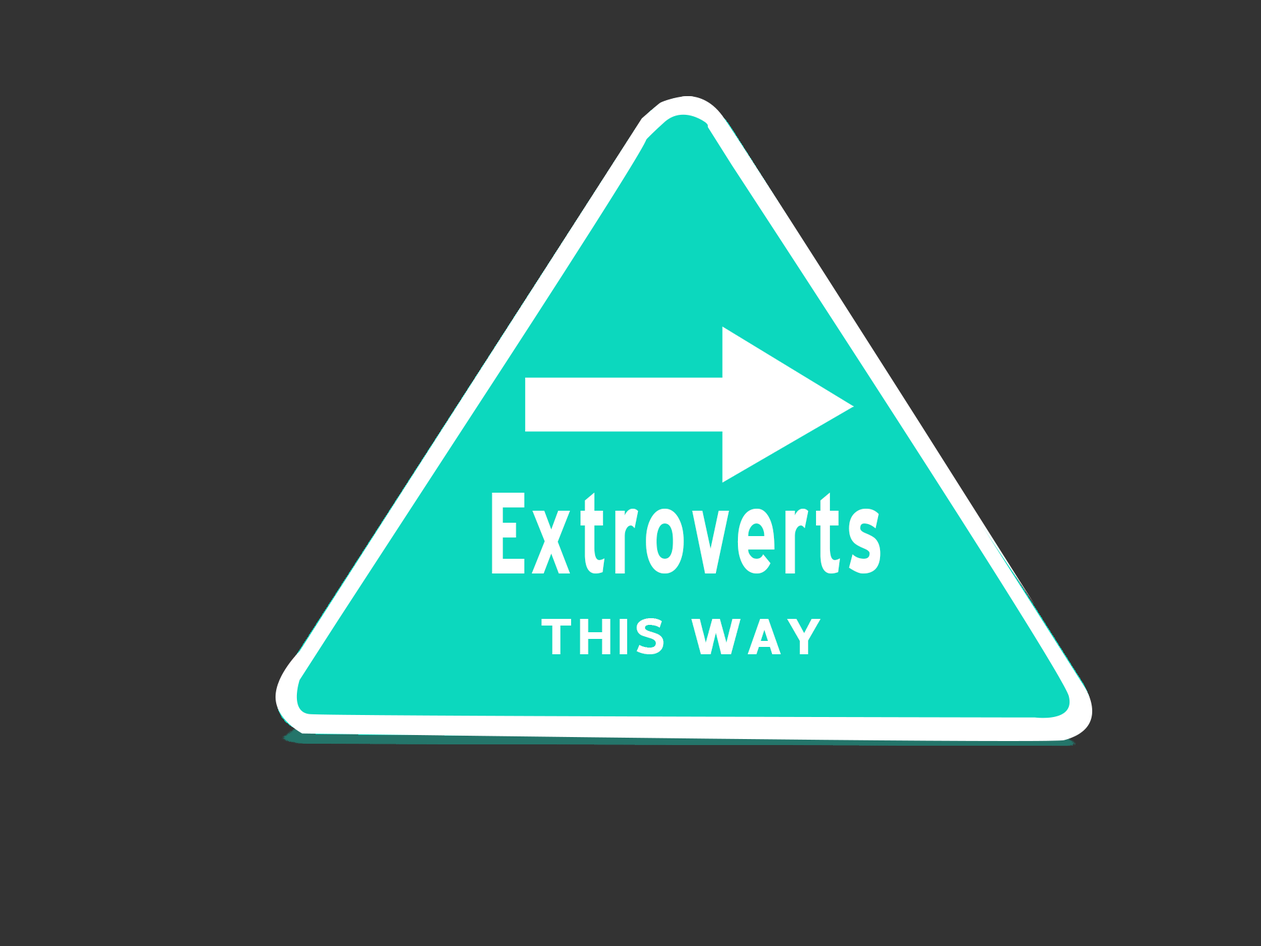
<style>
.page{position:relative;width:1261px;height:946px;background:#333333}
.page>*{position:absolute;margin:0}
.t1{font:138.4px "BlueHighwayBold";color:#ffffff;scale:0.6 1}
.t2{font:60.6px "BlueHighwayBold";color:#ffffff}
</style>
<div class="page">
<p class="t1" style="left:492px;top:492px;width:389px;height:81px">Extroverts</p>
<p class="t2" style="left:541px;top:618px;width:280px;height:36px">THIS WAY</p>
</div>
